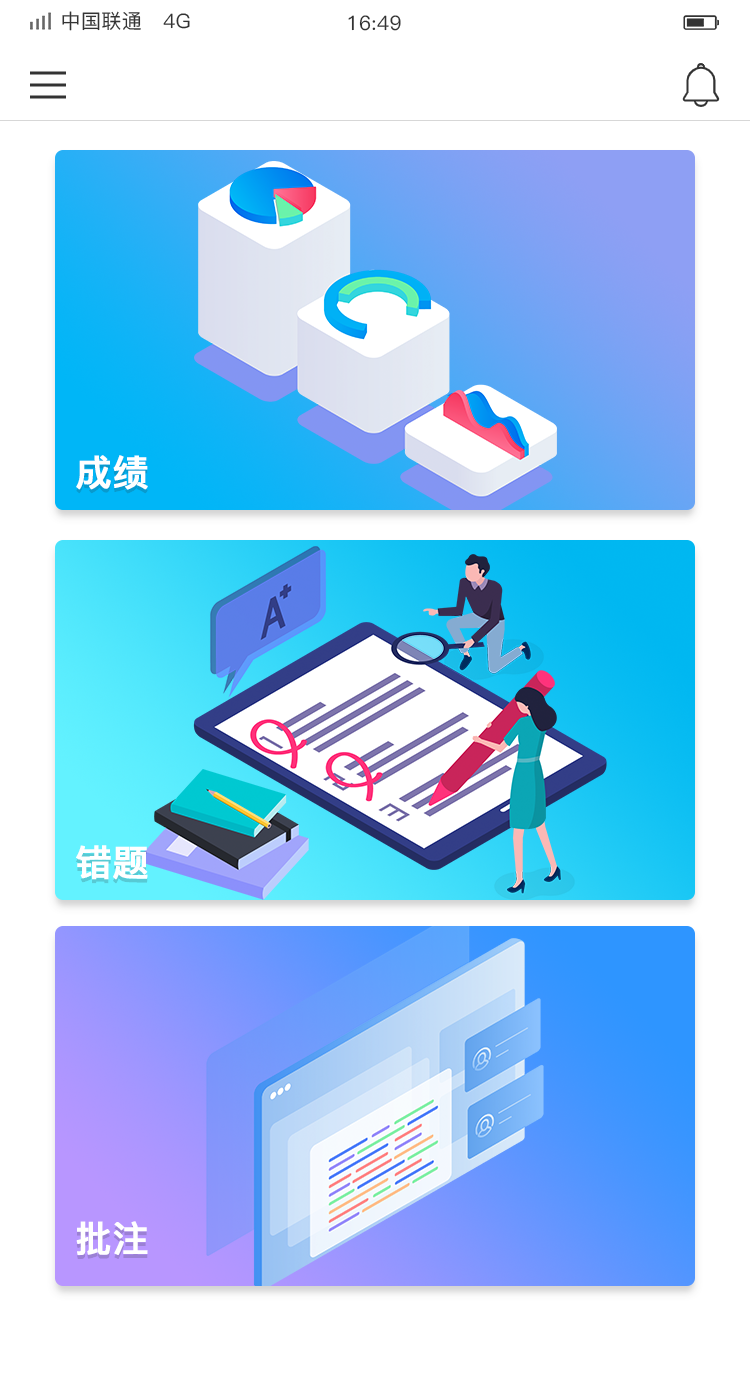
<style>
.page{position:relative;width:750px;height:1400px;background:#ffffff}
.page>*{position:absolute;margin:0}
.t1{font:20px "PingFang-SC-Medium";letter-spacing:0.02em;color:#333333}
.t2{font:36px "PingFang-SC-Bold";color:#ffffff;font-weight:bold}
</style>
<div class="page">
<p class="t1" style="left:62px;top:11px;width:128px;height:20px">中国联通   4G</p>
<p class="t1" style="left:348px;top:15px;width:53px;height:16px">16:49</p>
<p class="t2" style="left:76px;top:455px;width:72px;height:35px">成绩</p>
<p class="t2" style="left:76px;top:845px;width:72px;height:35px">错题</p>
<p class="t2" style="left:76px;top:1221px;width:72px;height:34px">批注</p>
</div>
